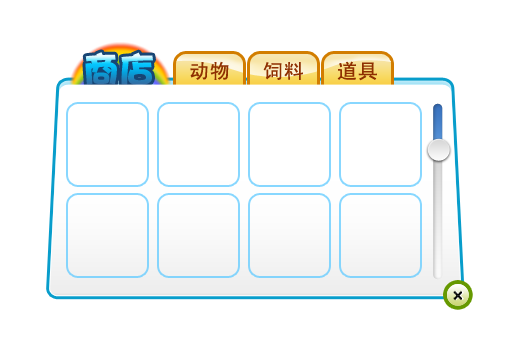
<style>
.page{position:relative;width:510px;height:340px;background:#ffffff}
.page>*{position:absolute;margin:0}
.t1{font:36px "DFPHaiBaoW12"}
.t2{font:20px "SimHei";letter-spacing:0.04em;color:#8f3001}
</style>
<div class="page">
<p class="t1" style="left:85px;top:52px;width:68px;height:33px">商店</p>
<p class="t2" style="left:190px;top:61px;width:187px;height:20px">动物   饲料   道具</p>
</div>
